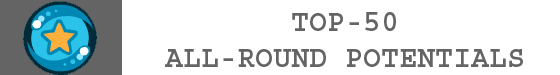
<style>
.page{position:relative;width:560px;height:75px;background:#ffffff}
.page>*{position:absolute;margin:0}
.t1{font:30px "Courier-Bold";color:#646464}
</style>
<div class="page">
<p class="t1" style="left:165px;top:12px;width:358px;height:55px;text-align:center">TOP-50<br>ALL-ROUND POTENTIALS</p>
</div>
